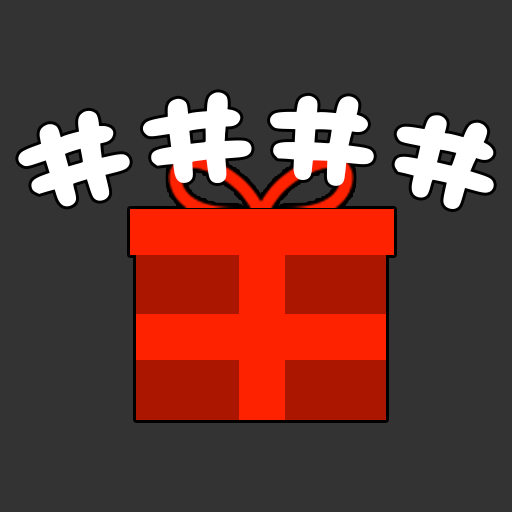
<style>
.page{position:relative;width:512px;height:512px;background:#333333}
.page>*{position:absolute;margin:0}
.t1{font:150px "Brutal_bounce-Regular";color:#ffffff}
</style>
<div class="page">
<p class="t1" style="left:18px;top:92px;width:476px;height:117px">####</p>
</div>
